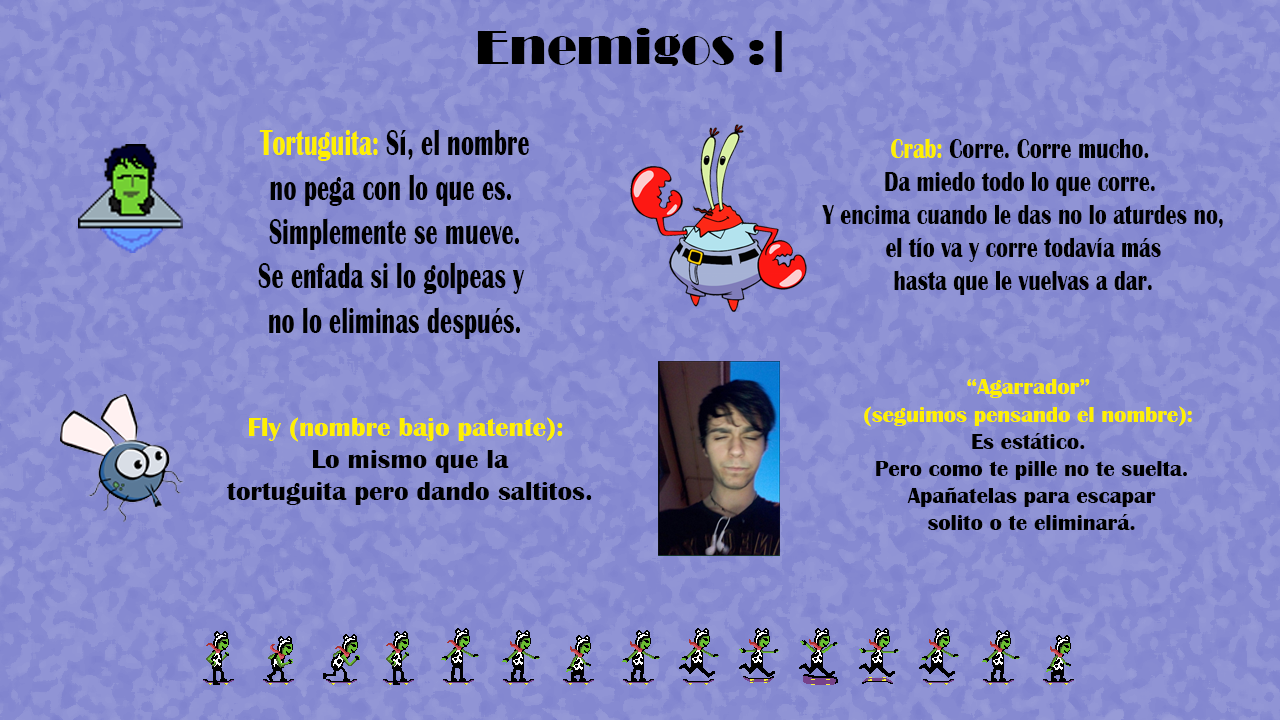
<style>
.page{position:relative;width:1280px;height:720px}
.page>*{position:absolute;margin:0}
.t1{font:12px "Broadway";color:#000000}
.t2{font:8.9px "BritannicBold";color:#000000;scale:0.66 1}
.t3{font:8.9px "BritannicBold";color:#fff000;scale:0.66 1}
.t4{font:6.6px "BritannicBold";color:#000000;scale:0.79 1}
.t5{font:6.6px "BritannicBold";color:#fff000;scale:0.79 1}
.t6{font:5.4px "BritannicBold";color:#000000}
.t7{font:5.4px "BritannicBold";color:#fff000}
.t8{font:6.5px "BritannicBold";color:#000000}
.t9{font:6.5px "BritannicBold";color:#fff000}
</style>
<div class="page">
<p class="t1" style="left:477px;top:28px;width:305px;height:44px;text-align:center">Enemigos :|</p>
<p class="t2" style="left:258px;top:129px;width:271px;height:210px;text-align:center"><span class="t3">Tortuguita: </span>Sí, el nombre<br>no pega con lo que es. <br>Simplemente se mueve.<br>Se enfada si lo golpeas y <br>no lo eliminas después.</p>
<p class="t4" style="left:822px;top:138px;width:401px;height:157px;text-align:center"><span class="t5">Crab: </span>Corre. Corre mucho.<br>Da miedo todo lo que corre.<br> Y encima cuando le das no lo aturdes no,<br> el tío va y corre todavía más<br> hasta que le vuelvas a dar.</p>
<p class="t6" style="left:864px;top:379px;width:328px;height:151px;text-align:center"><span class="t7">“Agarrador” <br>(seguimos pensando el nombre): <br></span>Es estático. <br>Pero como te pille no te suelta.<br>Apañatelas para escapar<br>solito o te eliminará.</p>
<p class="t8" style="left:227px;top:417px;width:365px;height:88px;text-align:center"><span class="t9">Fly (nombre bajo patente): <br></span>Lo mismo que la<br>tortuguita pero dando saltitos.</p>
</div>
